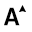
<style>
.page{position:relative;width:32px;height:32px;background:#ffffff}
.page>*{position:absolute;margin:0}
.t1{font:24.9px "Roboto-Bold";letter-spacing:0.025em;color:#000000}
</style>
<div class="page">
<p class="t1" style="left:4px;top:7px;width:16px;height:19px">A</p>
</div>
